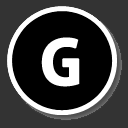
<style>
.page{position:relative;width:128px;height:128px;background:#000000}
.page>*{position:absolute;margin:0}
.t1{font:60px "AdobeGothicStd-Bold";color:#ffffff;font-weight:bold}
</style>
<div class="page">
<p class="t1" style="left:41px;top:37px;width:39px;height:50px">G</p>
</div>
